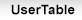
<style>
.page{position:relative;width:82px;height:20px}
.page>*{position:absolute;margin:0}
.t1{font:13.2px "Arial-BoldMT";color:#000000}
</style>
<div class="page">
<p class="t1" style="left:11px;top:4px;width:64px;height:11px">UserTable</p>
</div>
